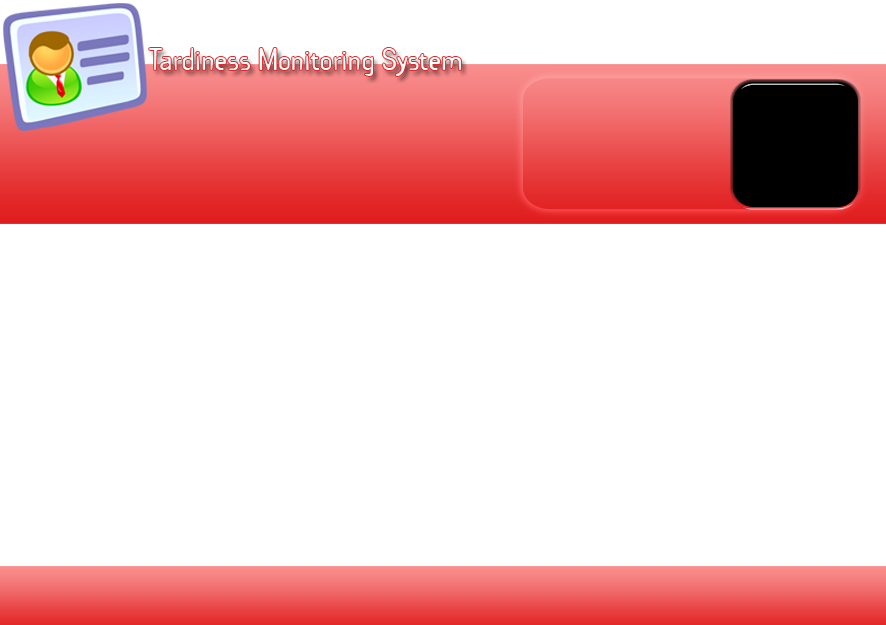
<style>
.page{position:relative;width:886px;height:625px;background:#ffffff}
.page>*{position:absolute;margin:0}
.t1{font:27.8px "Dewsbury";color:#ffffff}
</style>
<div class="page">
<p class="t1" style="left:149px;top:48px;width:312px;height:28px">Tardiness Monitoring System</p>
</div>
